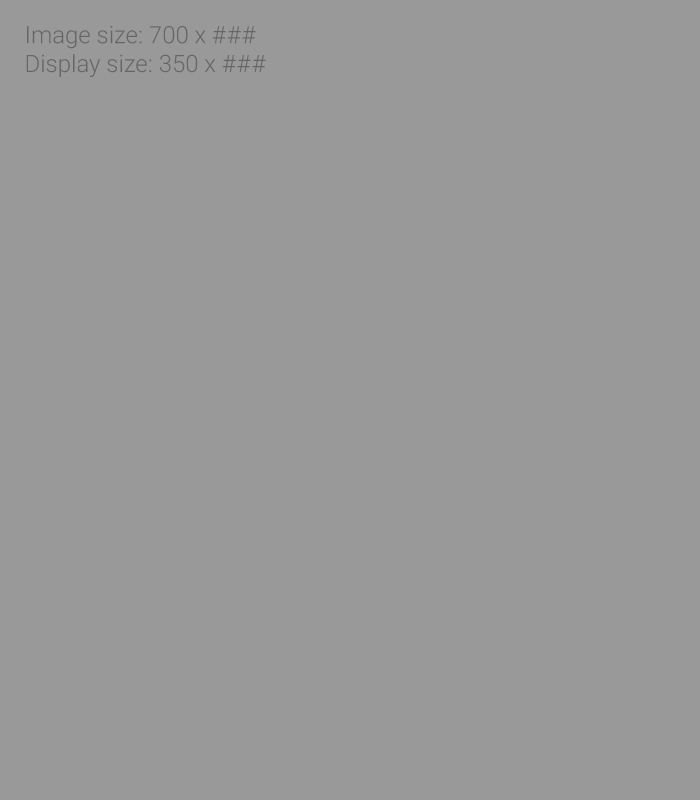
<style>
.page{position:relative;width:700px;height:800px;background:#999999}
.page>*{position:absolute;margin:0}
.t1{font:24px "Roboto-Light";color:#666666}
</style>
<div class="page">
<p class="t1" style="left:26px;top:26px;width:240px;height:51px">Image size: 700 x ###<br>Display size: 350 x ###</p>
</div>
